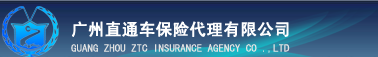
<style>
.page{position:relative;width:378px;height:57px}
.page>*{position:absolute;margin:0}
.t1{font:16.5px "SimHei";color:#fefefe;font-weight:bold}
.t2{font:10.9px "SimHei";color:#e2e2e2}
</style>
<div class="page">
<p class="t1" style="left:72px;top:21px;width:217px;height:16px">广州直通车保险代理有限公司</p>
<p class="t2" style="left:71px;top:44px;width:219px;height:9px">GUANG ZHOU ZTC INSURANCE AGENCY CO .,LTD</p>
</div>
